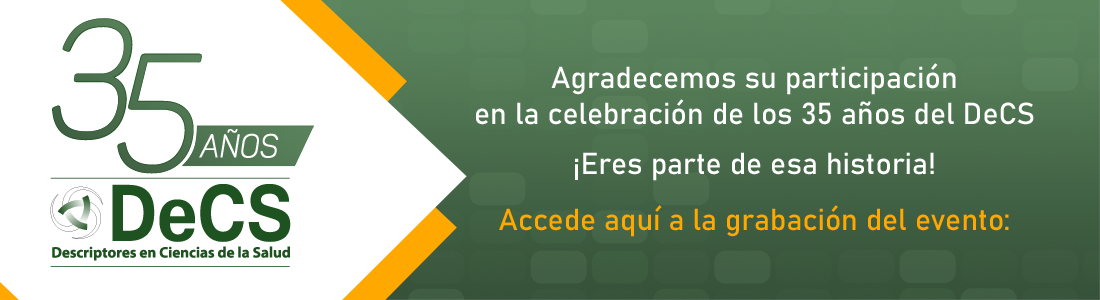
<style>
.page{position:relative;width:1100px;height:300px;background:#ffffff}
.page>*{position:absolute;margin:0}
.t1{font:162.5px "Panton-LightitalicCaps";color:#4b6f4d;font-weight:bold;scale:0.9 1}
.t2{font:162.5px "Panton-LightitalicCaps";color:#4d724f;font-weight:bold;scale:0.9 1}
.t3{font:30px "Bahnschrift";color:#ffffff}
.t4{font:30px/50px "Bahnschrift";color:#ffffff}
.t5{font:30px "Bahnschrift";color:#ffa800}
.t6{font:32px "Panton-LightitalicCaps";color:#ffffff;font-weight:bold;scale:0.9 1}
</style>
<div class="page">
<p class="t1" style="left:52px;top:18px;width:81px;height:123px">3</p>
<p class="t2" style="left:117px;top:53px;width:85px;height:121px">5</p>
<p class="t3" style="left:476px;top:63px;width:558px;height:174px;text-align:center">Agradecemos su participación<br>en la celebración de los 35 años del DeCS<br><span class="t4">¡Eres parte de esa historia!<br></span><span class="t5">Accede aquí a la grabación del evento:</span></p>
<p class="t6" style="left:199px;top:129px;width:80px;height:29px">años</p>
</div>
